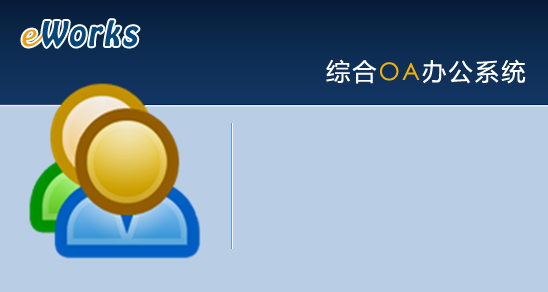
<style>
.page{position:relative;width:548px;height:292px;background:#b9cde5}
.page>*{position:absolute;margin:0}
.t1{font:30px "HoboStd";letter-spacing:0.1em;color:#07467c;font-style:italic}
.t2{font:30px "LucidaHandwriting-Italic";letter-spacing:0.1em;color:#ef9d0f}
.t3{font:24px "MicrosoftYaHei";letter-spacing:0.1em;color:#ffffff}
.t4{font:24px "CenturyGothic";letter-spacing:0.1em;color:#f2ae0b}
</style>
<div class="page">
<p class="t1" style="left:22px;top:20px;width:117px;height:27px"><span class="t2">e</span>Works</p>
<p class="t3" style="left:326px;top:59px;width:200px;height:25px">综合<span class="t4">OA</span>办公系统</p>
</div>
